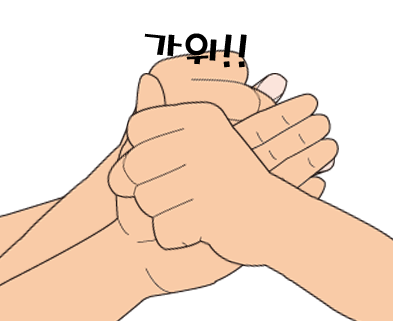
<style>
.page{position:relative;width:393px;height:321px;background:#ffffff}
.page>*{position:absolute;margin:0}
.t1{font:48px "MagicR-HM";color:#000000}
</style>
<div class="page">
<p class="t1" style="left:144px;top:33px;width:103px;height:35px">가위!!</p>
</div>
